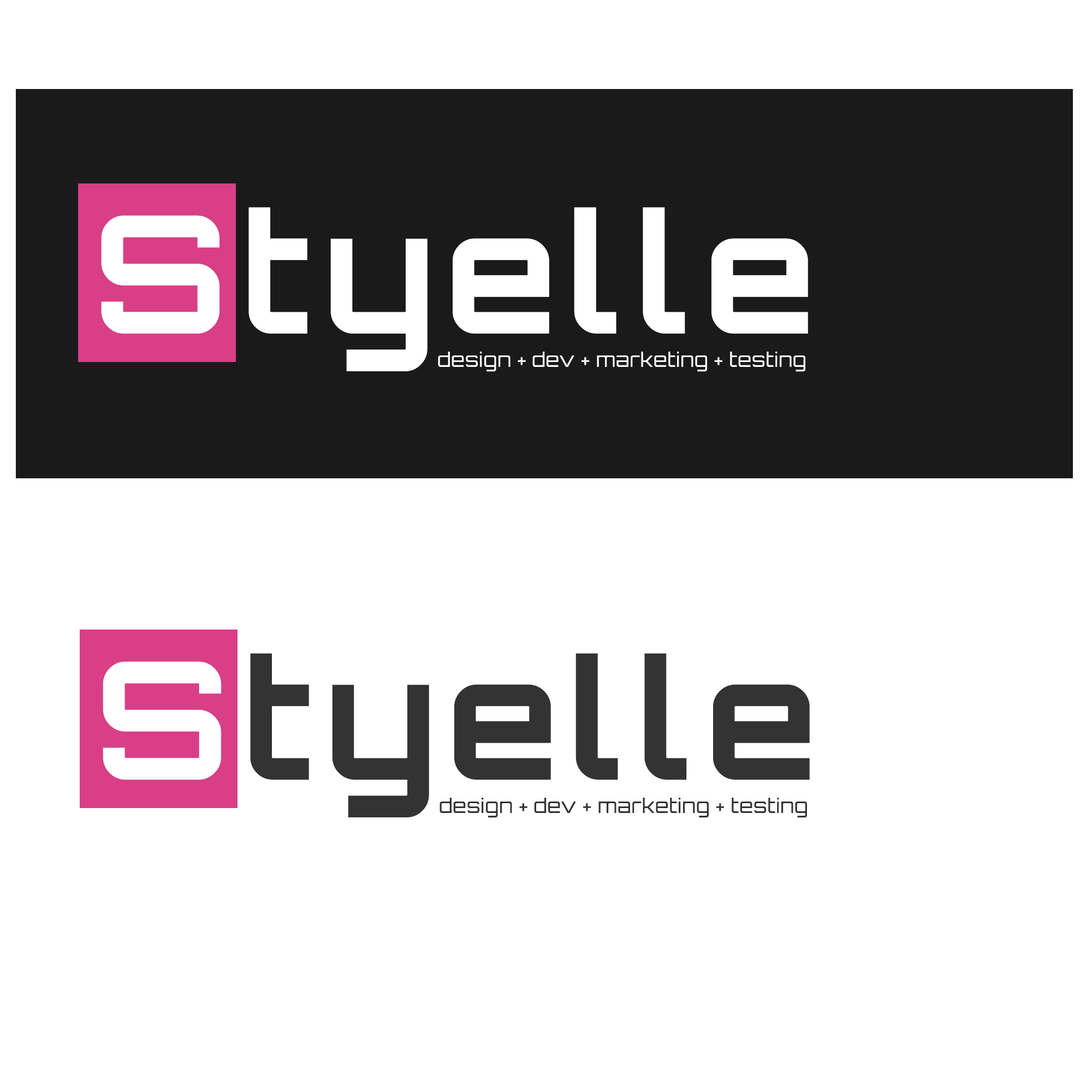
<style>
.page{position:relative;width:1092px;height:1092px;background:#ffffff}
.page>*{position:absolute;margin:0}
.t1{font:163.8px "Orbitron-Bold";letter-spacing:0.075em;color:#ffffff}
.t2{font:19.7px "Orbitron-Regular";letter-spacing:0.025em;color:#ffffff}
.t3{font:163.8px "Orbitron-Bold";letter-spacing:0.075em;color:#333333}
.t4{font:19.7px "Orbitron-Regular";letter-spacing:0.025em;color:#333333}
</style>
<div class="page">
<p class="t1" style="left:101px;top:207px;width:707px;height:164px">Styelle</p>
<p class="t2" style="left:438px;top:352px;width:367px;height:20px">design + dev + marketing + testing</p>
<p class="t3" style="left:103px;top:653px;width:707px;height:164px"><span class="t1">S</span>tyelle</p>
<p class="t4" style="left:440px;top:798px;width:367px;height:20px">design + dev + marketing + testing</p>
</div>
